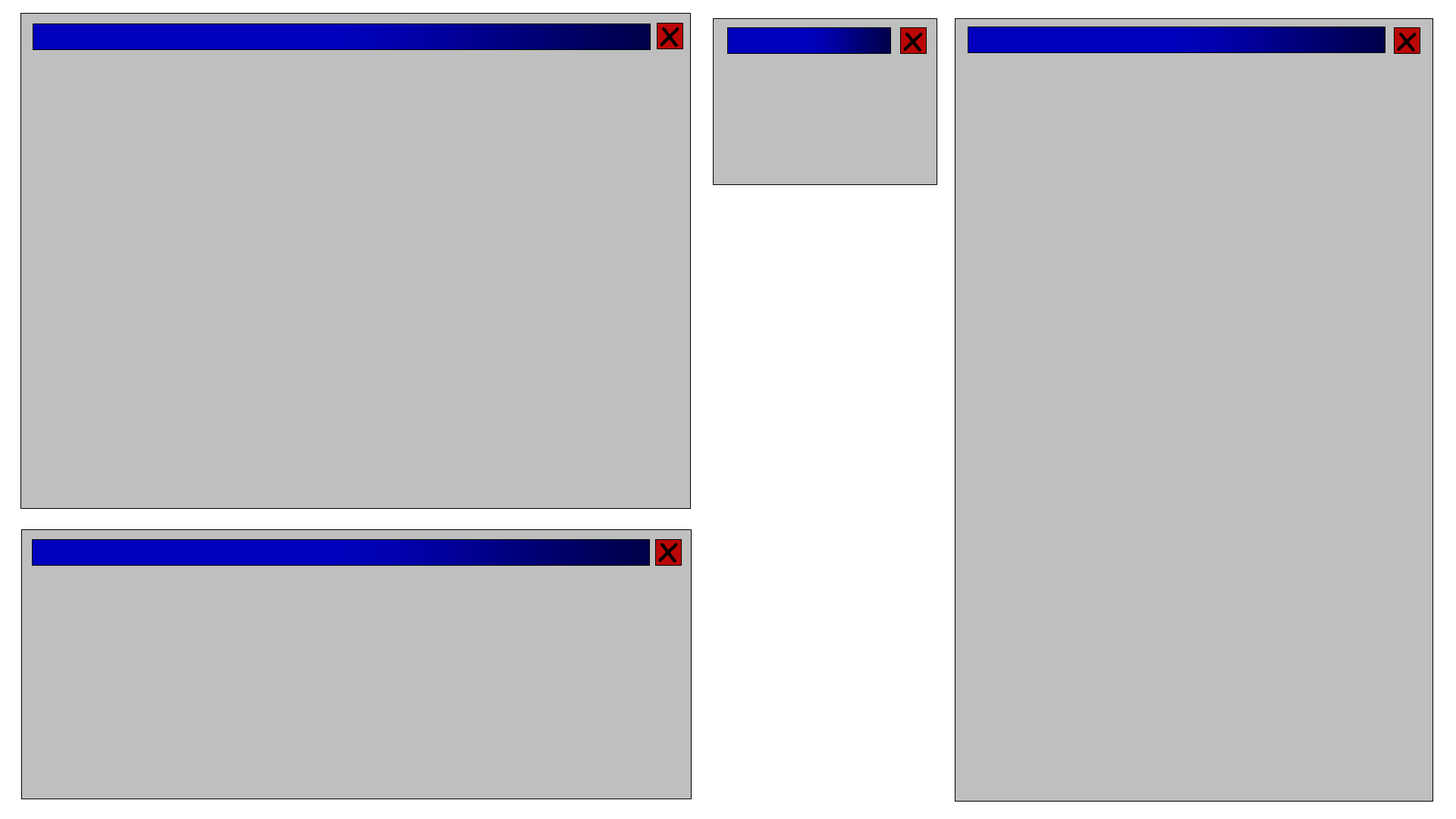
<style>
.page{position:relative;width:1456px;height:819px;background:#bfbfbf}
.page>*{position:absolute;margin:0}
.t1{font:36.2px "ComicSansMS";color:#000000}
.t2{font:36px "ComicSansMS";color:#000000}
</style>
<div class="page">
<p class="t1" style="left:660px;top:27px;width:19px;height:20px">x</p>
<p class="t2" style="left:903px;top:33px;width:20px;height:19px">x</p>
<p class="t2" style="left:1397px;top:33px;width:20px;height:19px">x</p>
<p class="t1" style="left:658px;top:543px;width:20px;height:20px">x</p>
</div>
